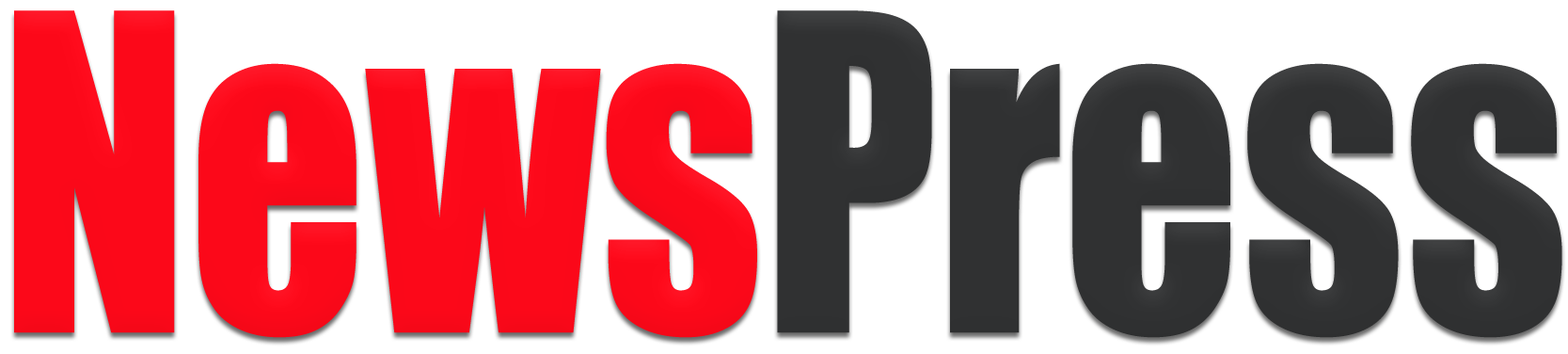
<style>
.page{position:relative;width:1568px;height:354px;background:#ffffff}
.page>*{position:absolute;margin:0}
.t1{font:406.6px "Impact";color:#303132;scale:0.86 1}
.t2{font:406.6px "Impact";color:#fc0819;scale:0.86 1}
</style>
<div class="page">
<p class="t1" style="left:14px;top:10px;width:1548px;height:328px"><span class="t2">News</span>Press</p>
</div>
